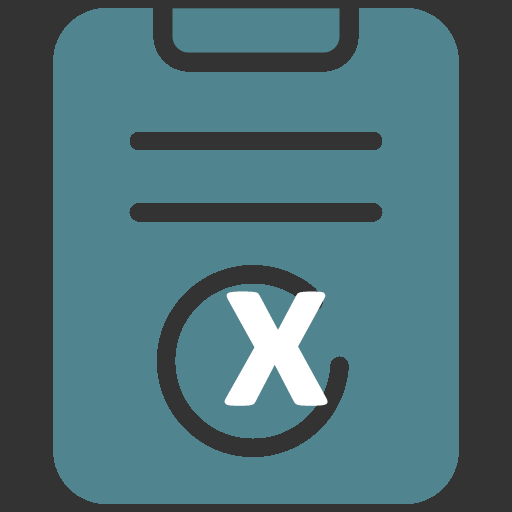
<style>
.page{position:relative;width:512px;height:512px;background:#508590}
.page>*{position:absolute;margin:0}
.t1{font:240px "Calibri-Bold";color:#ffffff}
</style>
<div class="page">
<p class="t1" style="left:224px;top:291px;width:104px;height:115px">x</p>
</div>
